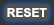
<style>
.page{position:relative;width:54px;height:25px;background:#505050}
.page>*{position:absolute;margin:0}
.t1{font:12px "Arial-BoldMT";color:#ffffff}
</style>
<div class="page">
<p class="t1" style="left:7px;top:8px;width:40px;height:9px">RESET</p>
</div>
